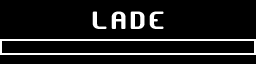
<style>
.page{position:relative;width:256px;height:64px;background:#000000}
.page>*{position:absolute;margin:0}
.t1{font:25px "GravitateBRK";letter-spacing:0.15em;color:#ffffff}
</style>
<div class="page">
<p class="t1" style="left:92px;top:11px;width:72px;height:18px">LADE</p>
</div>
